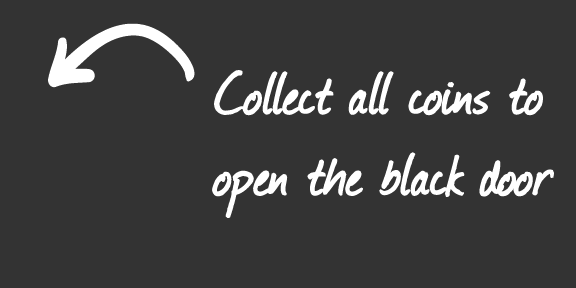
<style>
.page{position:relative;width:576px;height:288px;background:#333333}
.page>*{position:absolute;margin:0}
.t1{font:67.6px "Journal";color:#ffffff;font-weight:bold}
</style>
<div class="page">
<p class="t1" style="left:212px;top:70px;width:342px;height:148px">Collect all coins to <br>open the black door</p>
</div>
